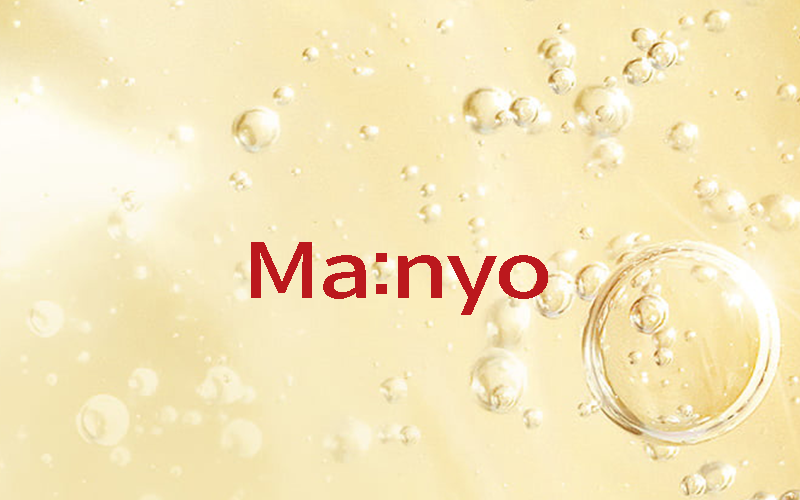
<style>
.page{position:relative;width:800px;height:500px}
.page>*{position:absolute;margin:0}
.t1{font:76px "SpoqaHanSansNeo-Medium";letter-spacing:-0.04em;color:#bb181d;scale:1.26 1}
</style>
<div class="page">
<p class="t1" style="left:251px;top:242px;width:297px;height:73px">Ma:nyo</p>
</div>
